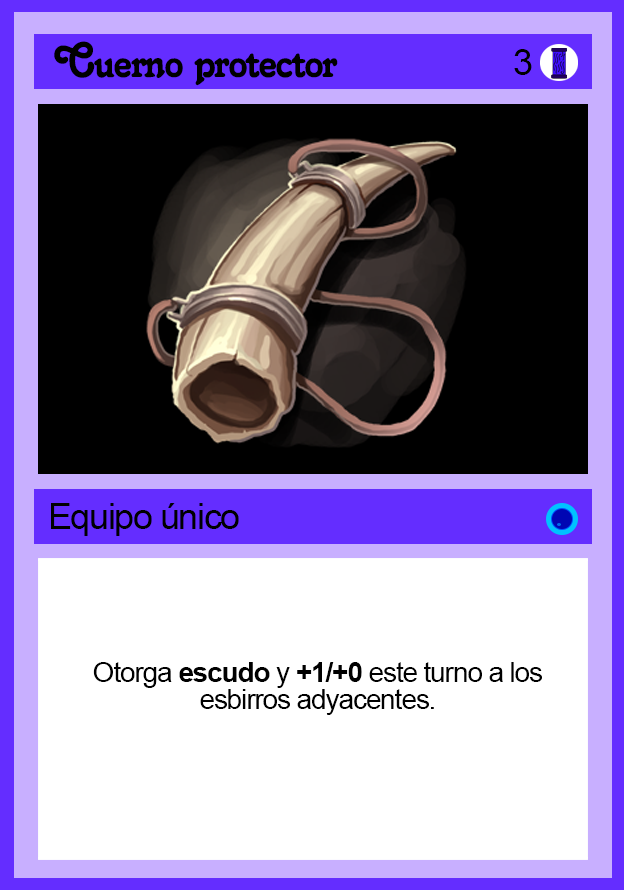
<style>
.page{position:relative;width:624px;height:890px;background:#ffffff}
.page>*{position:absolute;margin:0}
.t1{font:48px/27px "Salina";letter-spacing:-0.04em;color:#000000}
.t2{font:36px "ArialMT";letter-spacing:-0.04em;color:#000000}
.t3{font:28px/27px "ArialMT";letter-spacing:-0.04em;color:#000000}
.t4{font:28px/27px "Arial-BoldMT";letter-spacing:-0.04em;color:#000000}
</style>
<div class="page">
<p class="t1" style="left:54px;top:41px;width:284px;height:45px;text-align:center">Cuerno protector<br>´´ñgfdsa</p>
<p class="t2" style="left:514px;top:49px;width:18px;height:26px">3</p>
<p class="t2" style="left:51px;top:503px;width:188px;height:33px">Equipo único</p>
<p class="t3" style="left:93px;top:662px;width:449px;height:53px;text-align:center">Otorga <span class="t4">escudo </span>y <span class="t4">+1/+0 </span>este turno a los esbirros adyacentes.</p>
</div>
